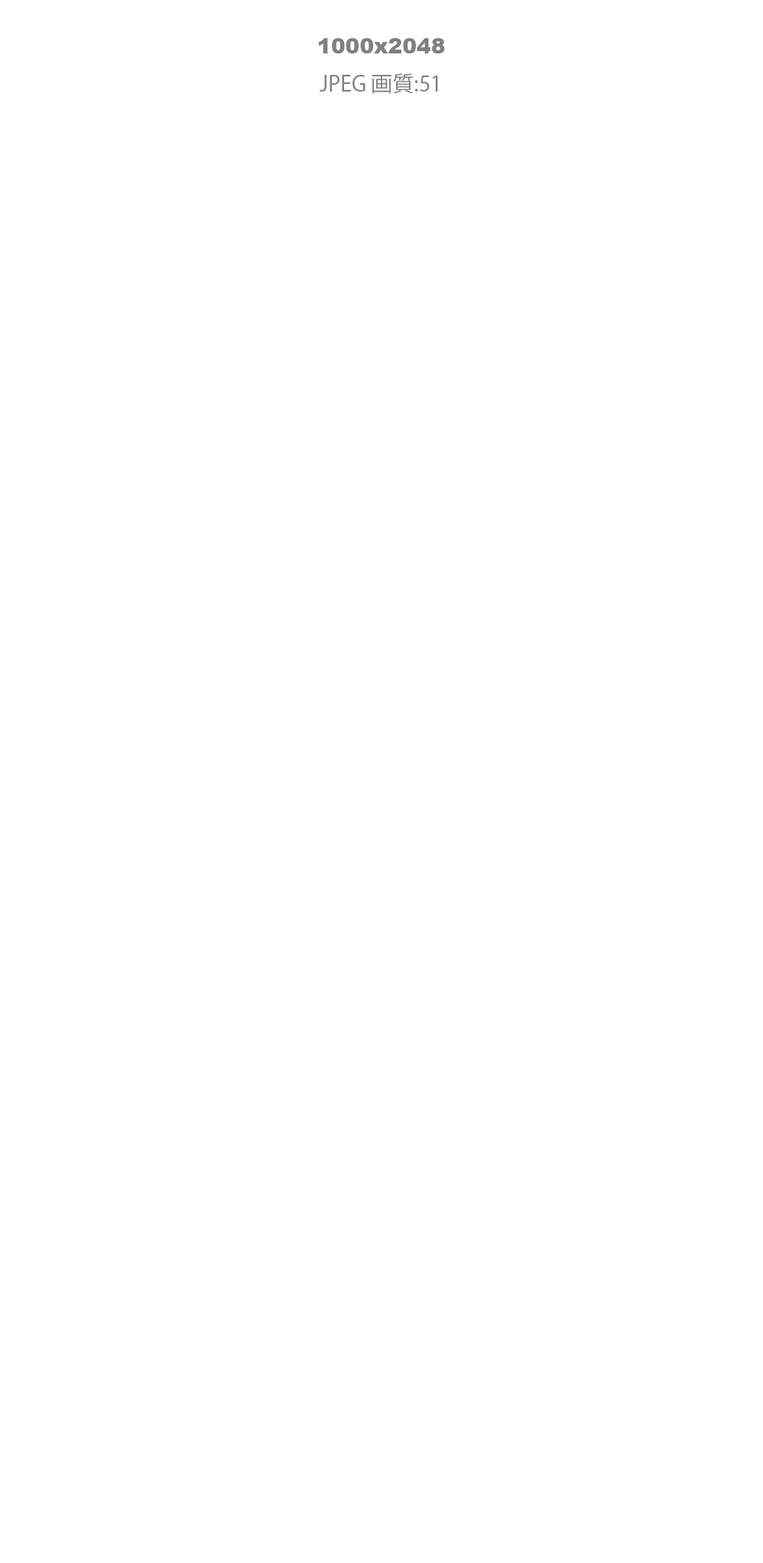
<style>
.page{position:relative;width:763px;height:1563px;background:#ffffff}
.page>*{position:absolute;margin:0}
.t1{font:21.4px "KozGoPr6N-Regular";color:#808080}
.t2{font:21.4px "Arial-Black";color:#808080}
</style>
<div class="page">
<p class="t1" style="left:318px;top:38px;width:127px;height:56px;text-align:center"><span class="t2">1000x2048<br></span>JPEG 画質:51</p>
</div>
